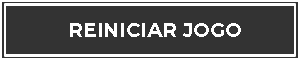
<style>
.page{position:relative;width:300px;height:60px;background:#333333}
.page>*{position:absolute;margin:0}
.t1{font:20px "Montserrat-Bold";color:#ffffff}
</style>
<div class="page">
<p class="t1" style="left:70px;top:23px;width:171px;height:14px">REINICIAR JOGO</p>
</div>
